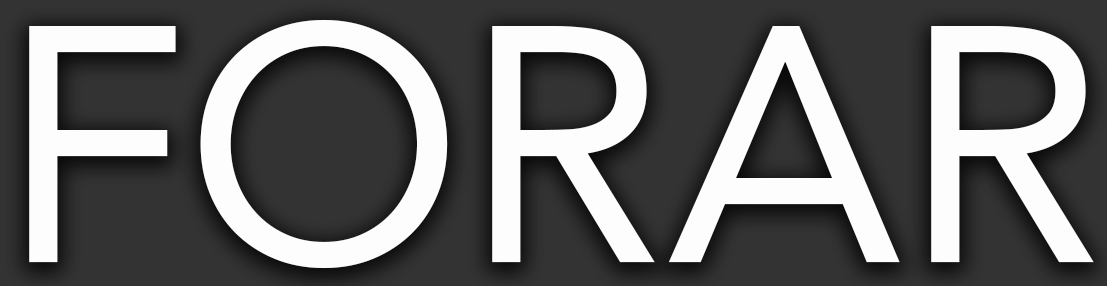
<style>
.page{position:relative;width:1107px;height:286px;background:#333333}
.page>*{position:absolute;margin:0}
.t1{font:333.3px "Avenir-Roman";color:#fdfdfd}
</style>
<div class="page">
<p class="t1" style="left:29px;top:20px;width:1065px;height:248px">FORAR</p>
</div>
